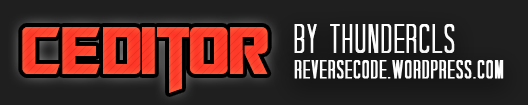
<style>
.page{position:relative;width:528px;height:105px;background:#1f1f1f}
.page>*{position:absolute;margin:0}
.t1{font:75px "TransformersMovie";color:#ff3124}
.t2{font:40.8px "TallDarkAndHandsome-Condensed";letter-spacing:0.05em;color:#fdfdfd}
.t3{font:25.3px "TallDarkAndHandsome-Condensed";letter-spacing:0.05em;color:#fdfdfd;font-weight:bold}
</style>
<div class="page">
<p class="t1" style="left:22px;top:27px;width:246px;height:66px">CEditor</p>
<p class="t2" style="left:294px;top:24px;width:161px;height:29px">by Thundercls</p>
<p class="t3" style="left:294px;top:60px;width:210px;height:19px">reversec0de.wordpress.com</p>
</div>
